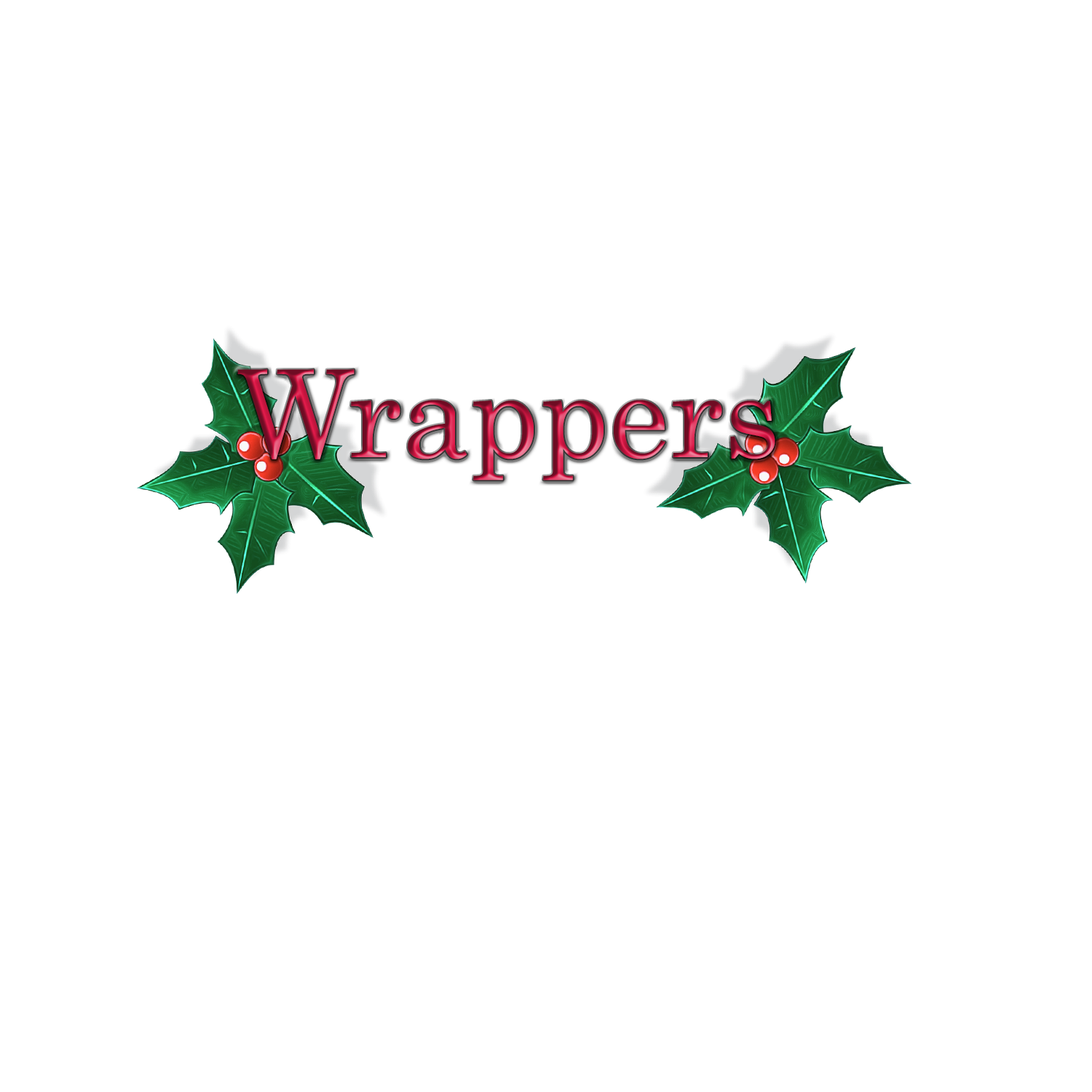
<style>
.page{position:relative;width:1092px;height:1092px;background:#ffffff}
.page>*{position:absolute;margin:0}
.t1{font:121.3px "Century"}
</style>
<div class="page">
<p class="t1" style="left:237px;top:369px;width:538px;height:111px">Wrappers</p>
</div>
